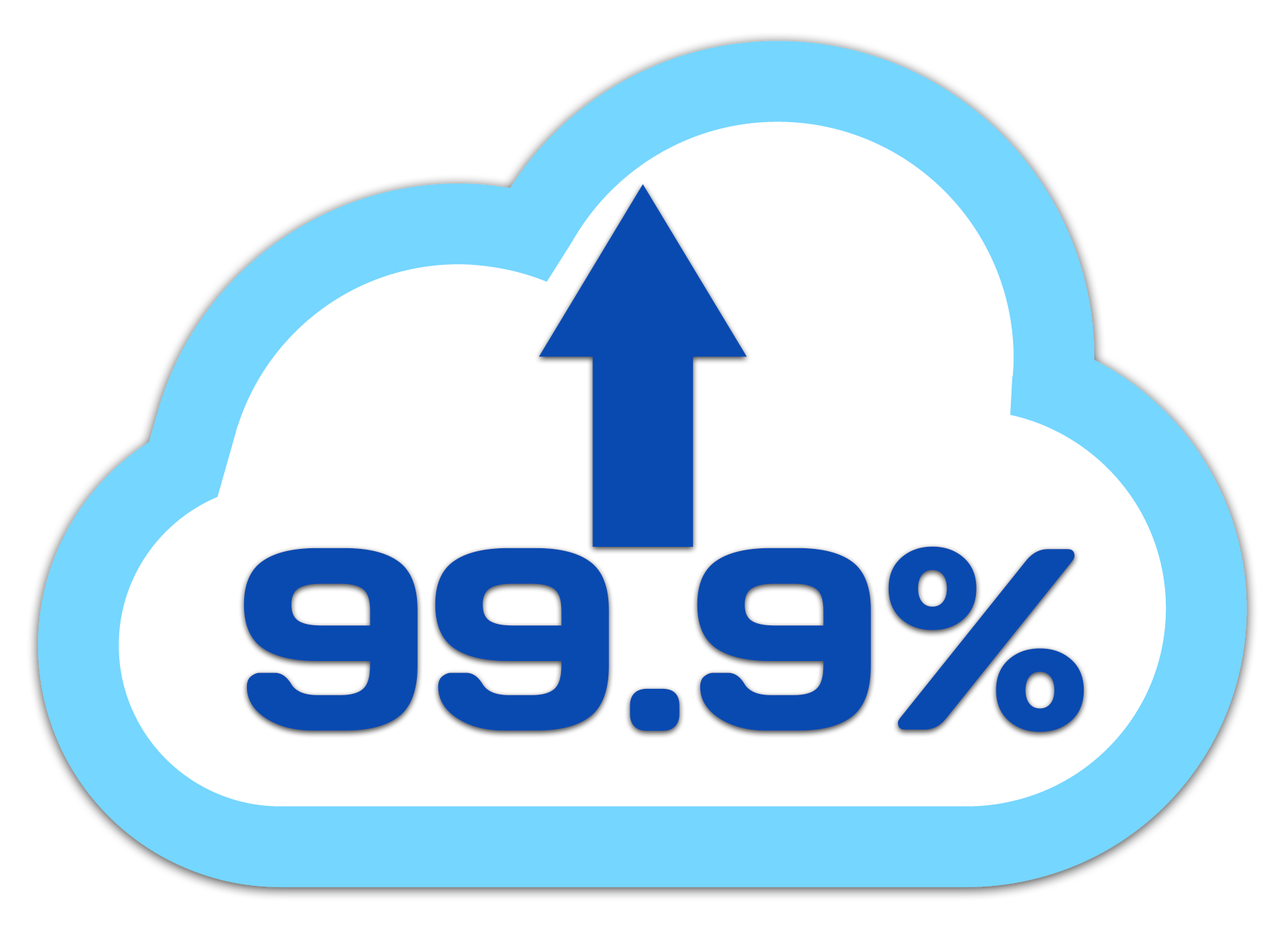
<style>
.page{position:relative;width:1285px;height:928px;background:#ffffff}
.page>*{position:absolute;margin:0}
.t1{font:257.8px "DaysOne-Regular";color:#094ab1}
</style>
<div class="page">
<p class="t1" style="left:243px;top:546px;width:841px;height:186px">99.9%</p>
</div>
